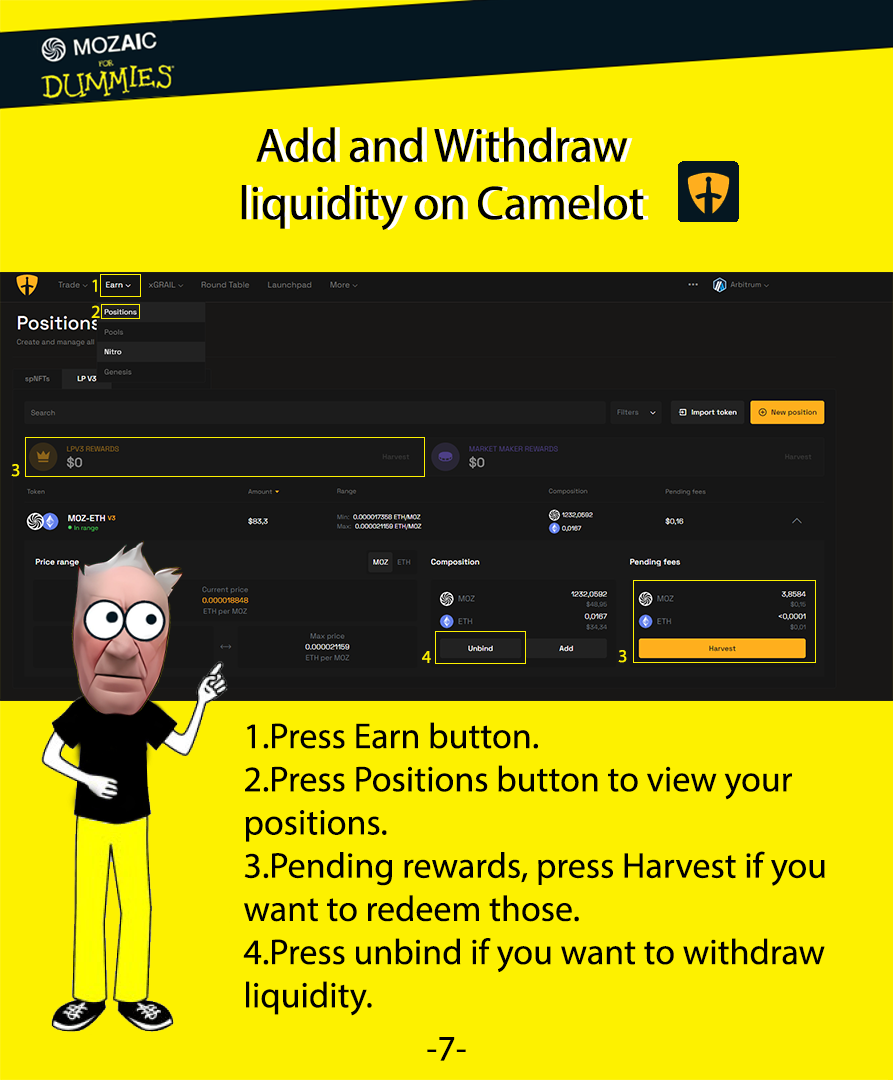
<style>
.page{position:relative;width:893px;height:1080px;background:#fdf100}
.page>*{position:absolute;margin:0}
.t1{font:48px "MyriadPro-Regular";color:#000000}
.t2{font:48px "MyriadPro-Regular";color:#ffffff}
.t3{font:18px "MyriadPro-Regular";color:#fdf100}
.t4{font:36px "MyriadPro-Regular";color:#000000}
</style>
<div class="page">
<p class="t1" style="left:241px;top:127px;width:403px;height:103px;text-align:center">Add and Withdraw <br>liquidity on Camelot</p>
<p class="t2" style="left:246px;top:127px;width:403px;height:103px;text-align:center">Add and Withdraw <br>liquidity on Camelot</p>
<p class="t3" style="left:92px;top:279px;width:5px;height:13px">1</p>
<p class="t3" style="left:91px;top:305px;width:9px;height:13px">2</p>
<p class="t3" style="left:11px;top:464px;width:9px;height:13px">3</p>
<p class="t3" style="left:422px;top:651px;width:9px;height:12px">4</p>
<p class="t3" style="left:618px;top:650px;width:9px;height:13px">3</p>
<p class="t4" style="left:243px;top:722px;width:582px;height:294px">1.Press Earn button.<br>2.Press Positions button to view your positions.<br>3.Pending rewards, press Harvest if you want to redeem those.<br>4.Press unbind if you want to withdraw<br>liquidity.</p>
<p class="t4" style="left:427px;top:1037px;width:39px;height:24px;text-align:center">-7-<br>--</p>
</div>
